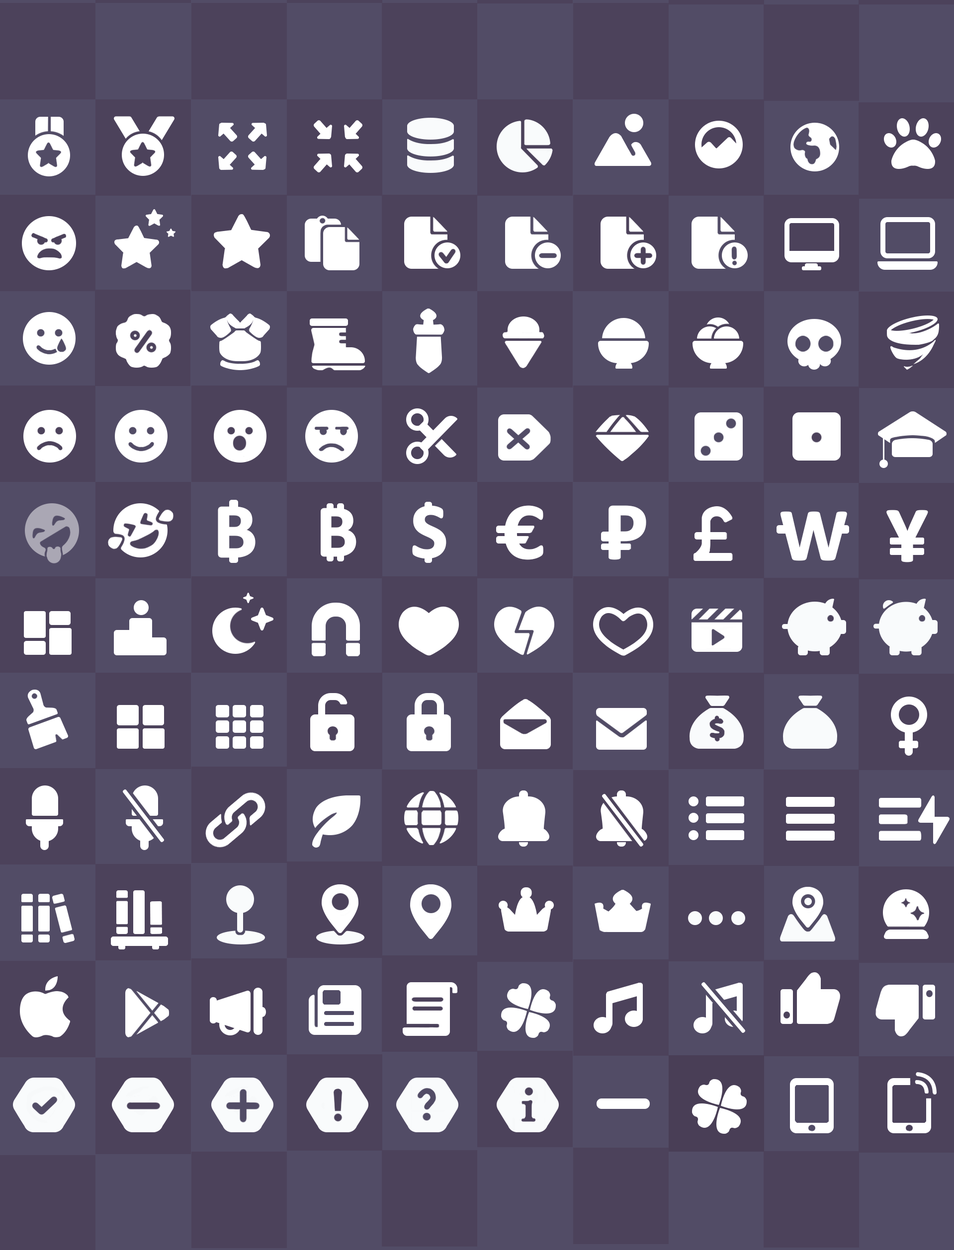
<style>
.page{position:relative;width:954px;height:1250px;background:#4c425b}
.page>*{position:absolute;margin:0}
.t1{font:78.6px "Calibri-Bold";letter-spacing:0.08em;color:#ffffff;font-weight:bold}
.t2{font:74.8px "Calibri-Bold";letter-spacing:0.08em;color:#ffffff;font-weight:bold}
.t3{font:79.9px "Calibri-Bold";letter-spacing:0.08em;color:#ffffff;font-weight:bold}
.t4{font:83.5px "Calibri-Bold";letter-spacing:0.08em;color:#ffffff;font-weight:bold}
.t5{font:75.4px "Calibri-Bold";letter-spacing:0.08em;color:#ffffff;font-weight:bold}
</style>
<div class="page">
<p class="t1" style="left:218px;top:506px;width:37px;height:52px">B</p>
<p class="t2" style="left:321px;top:508px;width:35px;height:49px">B</p>
<p class="t1" style="left:412px;top:505px;width:34px;height:54px">S</p>
<p class="t3" style="left:504px;top:505px;width:39px;height:55px">C</p>
<p class="t4" style="left:608px;top:505px;width:38px;height:55px">P</p>
<p class="t3" style="left:886px;top:510px;width:42px;height:53px">Y</p>
<p class="t5" style="left:780px;top:511px;width:67px;height:50px">W</p>
</div>
